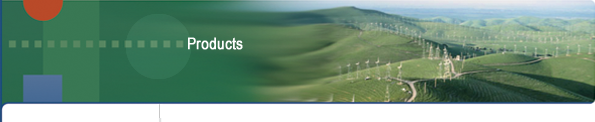
<style>
.page{position:relative;width:595px;height:122px}
.page>*{position:absolute;margin:0}
.t1{font:16px "ArialNarrow";color:#ffffff;font-weight:bold}
</style>
<div class="page">
<p class="t1" style="left:188px;top:37px;width:55px;height:13px">Products</p>
</div>
